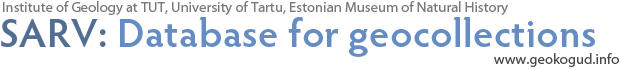
<style>
.page{position:relative;width:620px;height:70px;background:#ffffff}
.page>*{position:absolute;margin:0}
.t1{font:14.7px "MyriadPro-Regular";color:#797979}
.t2{font:40px "HypatiaSansPro-Semibold";letter-spacing:0.01em;color:#668dc3}
.t3{font:40px "HypatiaSansPro-Semibold";letter-spacing:0.01em;color:#536e93}
.t4{font:14.7px "MyriadPro-Regular";color:#494949}
</style>
<div class="page">
<p class="t1" style="left:3px;top:1px;width:505px;height:14px">Institute of Geology at TUT, University of Tartu, Estonian Museum of Natural History</p>
<p class="t2" style="left:1px;top:17px;width:594px;height:40px"><span class="t3">SARV:</span> Database for geocollections</p>
<p class="t4" style="left:494px;top:53px;width:125px;height:14px">www.geokogud.info</p>
</div>
